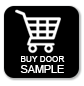
<style>
.page{position:relative;width:84px;height:86px;background:#000000}
.page>*{position:absolute;margin:0}
.t1{font:10.8px "ArialMT";color:#ffffff;font-variant:small-caps}
.t2{font:8.3px "ArialMT";color:#ffffff;font-variant:small-caps}
</style>
<div class="page">
<p class="t1" style="left:20px;top:65px;width:44px;height:8px">SAMPLE</p>
<p class="t2" style="left:21px;top:56px;width:44px;height:6px">BUY DOOR</p>
</div>
